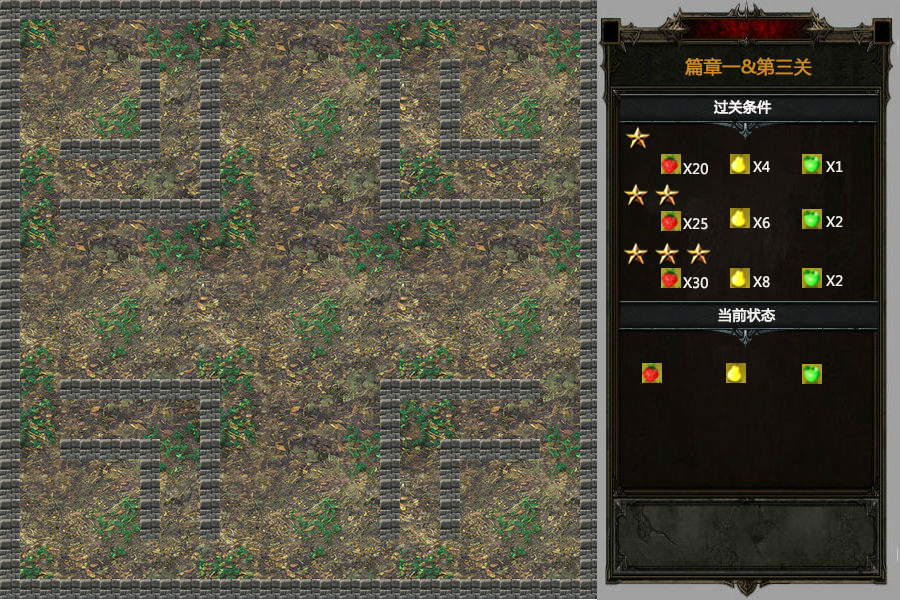
<style>
.page{position:relative;width:900px;height:600px}
.page>*{position:absolute;margin:0}
.t1{font:18px "MicrosoftYaHei";color:#cf8b20;font-weight:bold}
.t2{font:14px "MicrosoftYaHei";color:#f9f3f3;font-weight:bold}
.t3{font:14px "MicrosoftYaHei";color:#f1f0e9}
.t4{font:14px "MicrosoftYaHei";color:#f1f0e9;font-weight:bold}
</style>
<div class="page">
<p class="t1" style="left:685px;top:57px;width:127px;height:19px">篇章一&amp;第三关</p>
<p class="t2" style="left:714px;top:100px;width:58px;height:15px">过关条件</p>
<p class="t3" style="left:753px;top:161px;width:17px;height:11px">X4</p>
<p class="t3" style="left:826px;top:161px;width:17px;height:11px">X1</p>
<p class="t3" style="left:683px;top:163px;width:25px;height:12px">X20</p>
<p class="t3" style="left:683px;top:218px;width:25px;height:12px">X25</p>
<p class="t3" style="left:753px;top:217px;width:17px;height:12px">X6</p>
<p class="t3" style="left:826px;top:216px;width:17px;height:11px">X2</p>
<p class="t3" style="left:683px;top:277px;width:25px;height:12px">X30</p>
<p class="t3" style="left:753px;top:276px;width:17px;height:12px">X8</p>
<p class="t3" style="left:826px;top:275px;width:17px;height:11px">X2</p>
<p class="t4" style="left:718px;top:308px;width:58px;height:15px">当前状态</p>
</div>
